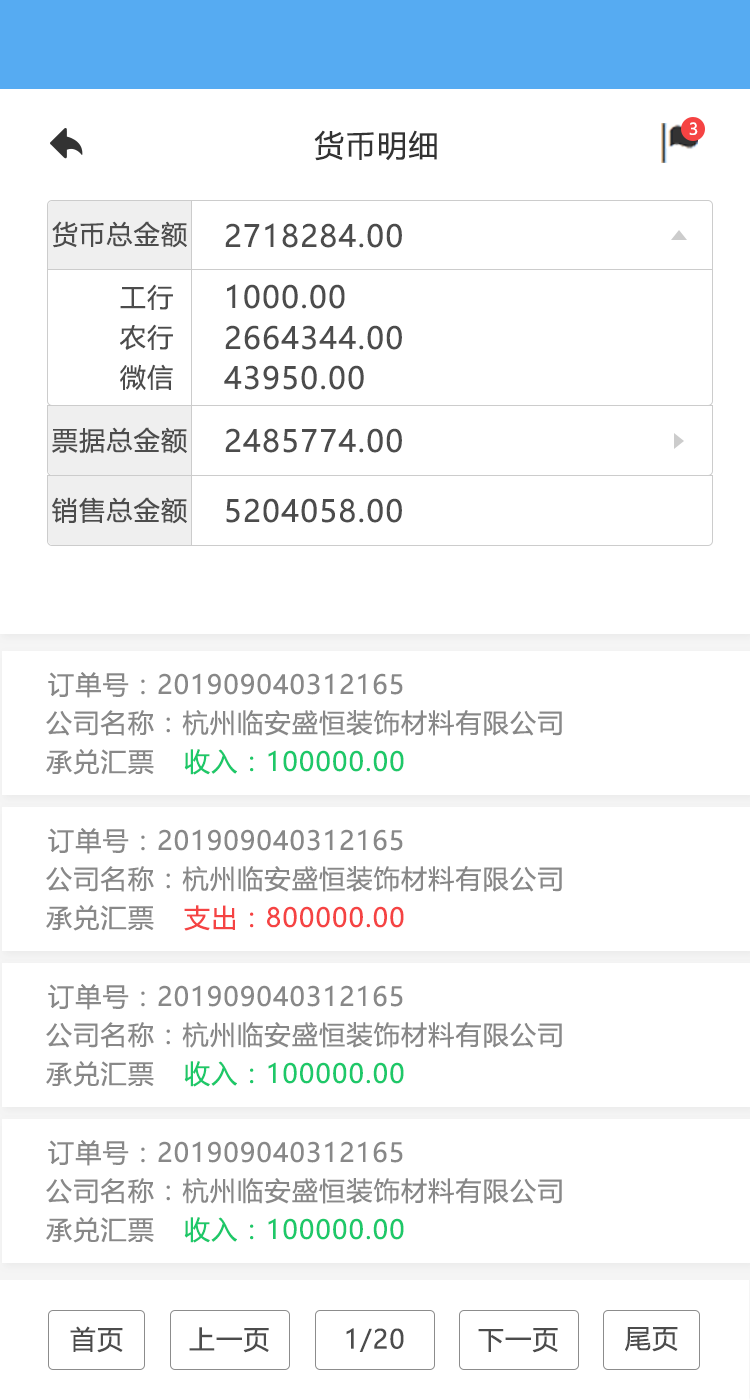
<style>
.page{position:relative;width:750px;height:1400px;background:#ffffff}
.page>*{position:absolute;margin:0}
.t1{font:16px "MicrosoftYaHeiUI";color:#ffffff}
.t2{font:30px "MicrosoftYaHeiUI";letter-spacing:0.05em;color:#333333}
.t3{font:26px "MicrosoftYaHeiUI";letter-spacing:0.05em;color:#4c4c4c}
.t4{font:30px "MicrosoftYaHeiUI";letter-spacing:0.05em;color:#4c4c4c}
.t5{font:26px "MicrosoftYaHeiUI";letter-spacing:0.05em;color:#888888}
.t6{font:26px "MicrosoftYaHeiUI";letter-spacing:0.05em;color:#1dc869}
.t7{font:26px "MicrosoftYaHeiUI";letter-spacing:0.05em;color:#f54343}
</style>
<div class="page">
<p class="t1" style="left:689px;top:122px;width:9px;height:13px">3</p>
<p class="t2" style="left:314px;top:130px;width:123px;height:31px">货币明细</p>
<p class="t3" style="left:52px;top:221px;width:135px;height:27px">货币总金额</p>
<p class="t4" style="left:225px;top:223px;width:177px;height:25px">2718284.00</p>
<p class="t3" style="left:120px;top:284px;width:53px;height:26px">工行</p>
<p class="t4" style="left:227px;top:284px;width:118px;height:25px">1000.00</p>
<p class="t3" style="left:120px;top:324px;width:53px;height:26px">农行</p>
<p class="t4" style="left:225px;top:325px;width:177px;height:25px">2664344.00</p>
<p class="t3" style="left:120px;top:364px;width:53px;height:27px">微信</p>
<p class="t4" style="left:224px;top:365px;width:140px;height:25px">43950.00</p>
<p class="t3" style="left:52px;top:427px;width:135px;height:27px">票据总金额</p>
<p class="t4" style="left:225px;top:428px;width:177px;height:25px">2485774.00</p>
<p class="t3" style="left:52px;top:497px;width:135px;height:27px">销售总金额</p>
<p class="t4" style="left:226px;top:498px;width:176px;height:25px">5204058.00</p>
<p class="t5" style="left:48px;top:672px;width:355px;height:26px">订单号：201909040312165</p>
<p class="t5" style="left:46px;top:710px;width:516px;height:26px">公司名称：杭州临安盛恒装饰材料有限公司</p>
<p class="t5" style="left:46px;top:749px;width:108px;height:26px">承兑汇票</p>
<p class="t6" style="left:184px;top:749px;width:220px;height:26px">收入：100000.00</p>
<p class="t5" style="left:48px;top:828px;width:355px;height:26px">订单号：201909040312165</p>
<p class="t5" style="left:46px;top:866px;width:516px;height:26px">公司名称：杭州临安盛恒装饰材料有限公司</p>
<p class="t5" style="left:46px;top:905px;width:108px;height:26px">承兑汇票</p>
<p class="t7" style="left:184px;top:905px;width:220px;height:26px">支出：800000.00</p>
<p class="t5" style="left:48px;top:984px;width:355px;height:26px">订单号：201909040312165</p>
<p class="t5" style="left:46px;top:1022px;width:516px;height:26px">公司名称：杭州临安盛恒装饰材料有限公司</p>
<p class="t5" style="left:46px;top:1061px;width:108px;height:26px">承兑汇票</p>
<p class="t6" style="left:184px;top:1061px;width:220px;height:26px">收入：100000.00</p>
<p class="t5" style="left:48px;top:1140px;width:355px;height:26px">订单号：201909040312165</p>
<p class="t5" style="left:46px;top:1178px;width:516px;height:26px">公司名称：杭州临安盛恒装饰材料有限公司</p>
<p class="t5" style="left:46px;top:1217px;width:108px;height:26px">承兑汇票</p>
<p class="t6" style="left:184px;top:1217px;width:220px;height:26px">收入：100000.00</p>
<p class="t3" style="left:70px;top:1326px;width:53px;height:27px">首页</p>
<p class="t3" style="left:189px;top:1327px;width:80px;height:26px">上一页</p>
<p class="t3" style="left:346px;top:1328px;width:58px;height:24px">1/20</p>
<p class="t3" style="left:478px;top:1328px;width:80px;height:25px">下一页</p>
<p class="t3" style="left:625px;top:1327px;width:53px;height:25px">尾页</p>
</div>
